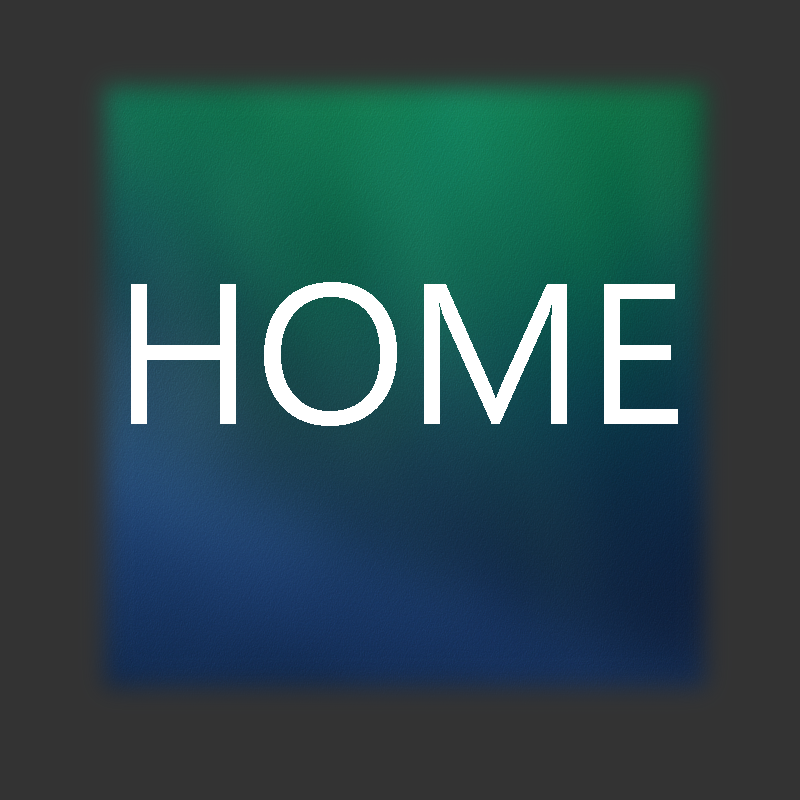
<style>
.page{position:relative;width:800px;height:800px;background:#333333}
.page>*{position:absolute;margin:0}
.t1{font:200px "KhmerUI";color:#ffffff}
</style>
<div class="page">
<p class="t1" style="left:131px;top:282px;width:547px;height:144px">HOME</p>
</div>
